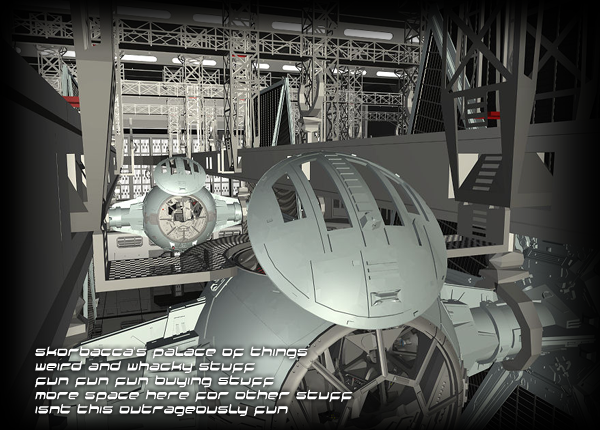
<style>
.page{position:relative;width:600px;height:430px}
.page>*{position:absolute;margin:0}
.t1{font:12px "Halo";color:#ffffff}
.t2{font:12px "ArialMT";color:#ffffff}
</style>
<div class="page">
<p class="t1" style="left:35px;top:346px;width:318px;height:70px">skorbacca<span class="t2">’</span>s palace of things<br>weird and whacky stuff<br>fun fun fun buying stuff<br>more space here for other stuff<br>isnt this outrageously fun</p>
</div>
